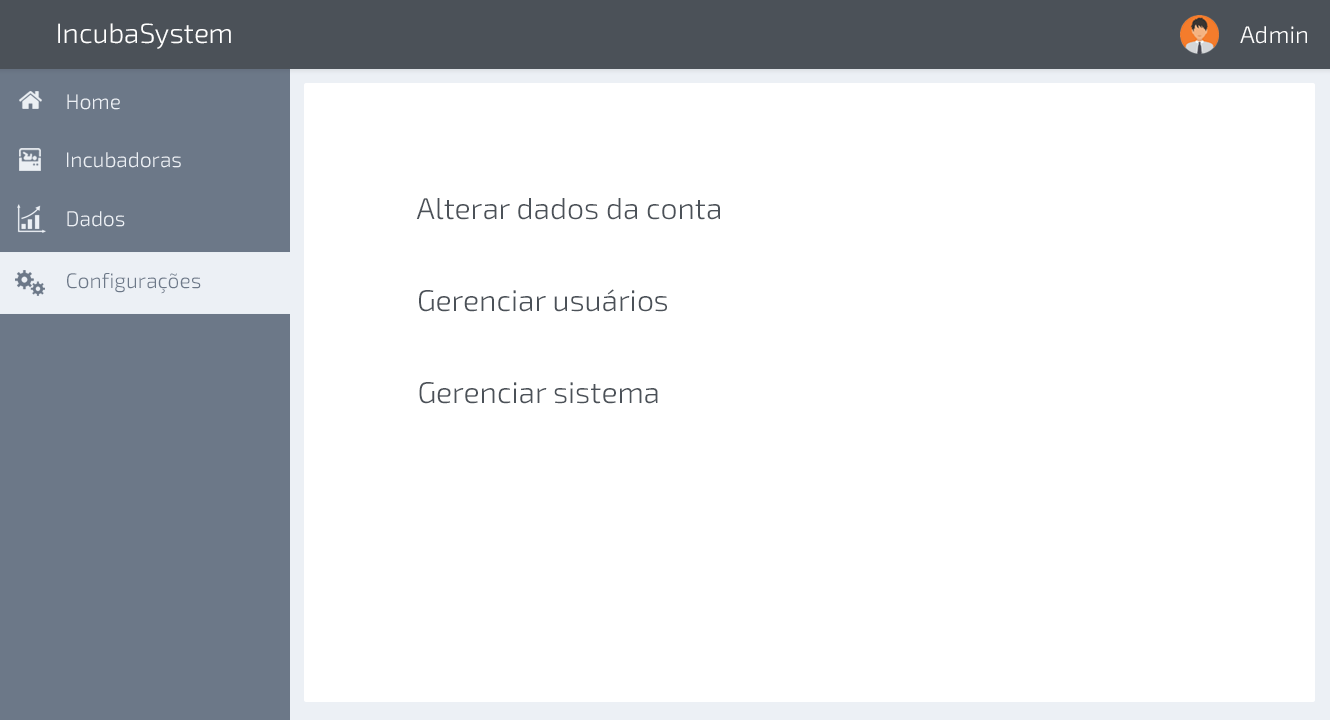
<style>
.page{position:relative;width:1330px;height:720px;background:#ffffff}
.page>*{position:absolute;margin:0}
.t1{font:28px "Exo2-Light";color:#ffffff}
.t2{font:24px "Exo2-Light";color:#ffffff}
.t3{font:21px "Exo2-Light";color:#ecf0f5}
.t4{font:30px "Exo2-Light";color:#4b5158}
.t5{font:21px "Exo2-Light";color:#6c7888}
</style>
<div class="page">
<p class="t1" style="left:58px;top:23px;width:173px;height:26px">IncubaSystem</p>
<p class="t2" style="left:1240px;top:26px;width:67px;height:18px">Admin</p>
<p class="t3" style="left:67px;top:94px;width:53px;height:16px">Home</p>
<p class="t3" style="left:67px;top:152px;width:114px;height:16px">Incubadoras</p>
<p class="t4" style="left:416px;top:198px;width:304px;height:22px">Alterar dados da conta</p>
<p class="t3" style="left:67px;top:211px;width:58px;height:16px">Dados</p>
<p class="t5" style="left:67px;top:273px;width:134px;height:21px">Configurações</p>
<p class="t4" style="left:419px;top:289px;width:248px;height:23px">Gerenciar usuários</p>
<p class="t4" style="left:419px;top:382px;width:239px;height:22px">Gerenciar sistema</p>
</div>
